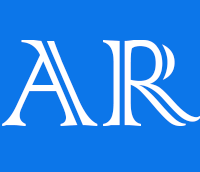
<style>
.page{position:relative;width:200px;height:172px;background:#0c76e9}
.page>*{position:absolute;margin:0}
.t1{font:164.2px "ColonnaMT";color:#ffffff;scale:0.89 1}
</style>
<div class="page">
<p class="t1" style="left:2px;top:40px;width:199px;height:86px">AR</p>
</div>
